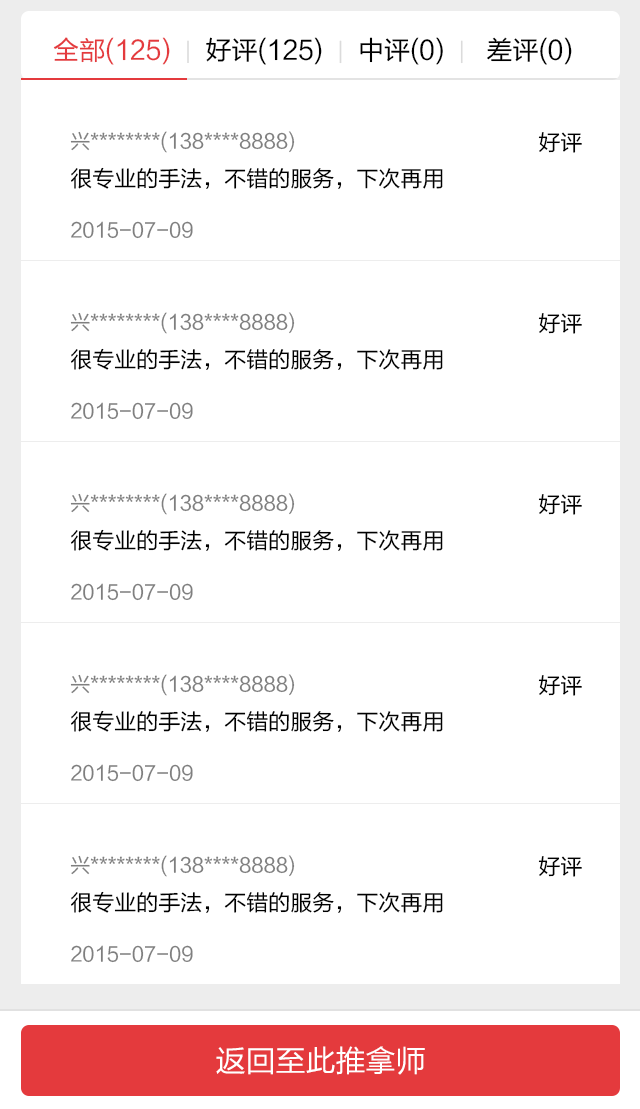
<style>
.page{position:relative;width:640px;height:1109px;background:#ffffff}
.page>*{position:absolute;margin:0}
.t1{font:26px "FZLTHJW--GB1-0";color:#e43a3d}
.t2{font:22px "FZLTHJW--GB1-0";color:#dbdbdb}
.t3{font:26px "FZLTHJW--GB1-0";color:#000000}
.t4{font:20px "FZLTHJW--GB1-0";color:#7f7f7f}
.t5{font:22px "FZLTHJW--GB1-0";color:#000000}
.t6{font:30px "FZLTHJW--GB1-0";color:#ffffff}
</style>
<div class="page">
<p class="t1" style="left:53px;top:37px;width:519px;height:28px">全部(125)  <span class="t2">|  </span><span class="t3">好评(125)  </span><span class="t2">|  </span><span class="t3">中评(0)  </span><span class="t2">|   </span><span class="t3">差评(0)</span></p>
<p class="t4" style="left:70px;top:131px;width:225px;height:22px">兴********(138****8888)</p>
<p class="t5" style="left:538px;top:132px;width:44px;height:21px">好评</p>
<p class="t5" style="left:71px;top:167px;width:372px;height:22px">很专业的手法，不错的服务，下次再用</p>
<p class="t4" style="left:71px;top:221px;width:122px;height:18px">2015-07-09</p>
<p class="t4" style="left:70px;top:312px;width:225px;height:22px">兴********(138****8888)</p>
<p class="t5" style="left:538px;top:313px;width:44px;height:21px">好评</p>
<p class="t5" style="left:71px;top:348px;width:372px;height:22px">很专业的手法，不错的服务，下次再用</p>
<p class="t4" style="left:71px;top:402px;width:122px;height:18px">2015-07-09</p>
<p class="t4" style="left:70px;top:493px;width:225px;height:22px">兴********(138****8888)</p>
<p class="t5" style="left:538px;top:494px;width:44px;height:21px">好评</p>
<p class="t5" style="left:71px;top:529px;width:372px;height:22px">很专业的手法，不错的服务，下次再用</p>
<p class="t4" style="left:71px;top:583px;width:122px;height:18px">2015-07-09</p>
<p class="t4" style="left:70px;top:674px;width:225px;height:22px">兴********(138****8888)</p>
<p class="t5" style="left:538px;top:675px;width:44px;height:21px">好评</p>
<p class="t5" style="left:71px;top:710px;width:372px;height:22px">很专业的手法，不错的服务，下次再用</p>
<p class="t4" style="left:71px;top:764px;width:122px;height:18px">2015-07-09</p>
<p class="t4" style="left:70px;top:855px;width:225px;height:22px">兴********(138****8888)</p>
<p class="t5" style="left:538px;top:856px;width:44px;height:21px">好评</p>
<p class="t5" style="left:71px;top:891px;width:372px;height:22px">很专业的手法，不错的服务，下次再用</p>
<p class="t4" style="left:71px;top:945px;width:122px;height:18px">2015-07-09</p>
<p class="t6" style="left:216px;top:1046px;width:209px;height:29px">返回至此推拿师</p>
</div>
